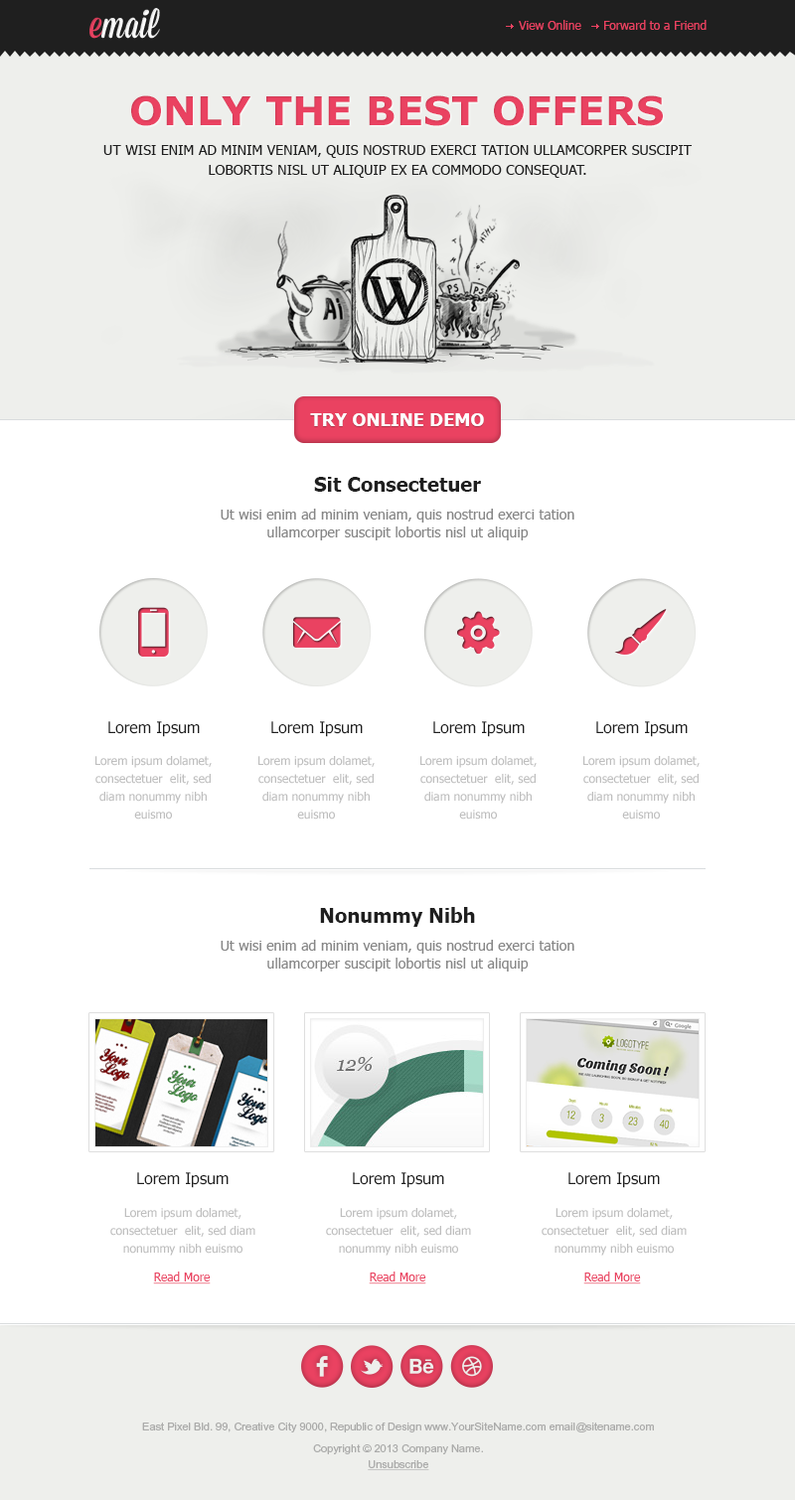
<style>
.page{position:relative;width:795px;height:1500px;background:#ffffff}
.page>*{position:absolute;margin:0}
.t1{font:11.9px "Tahoma";color:#ea4261}
.t2{font:39.7px "Verdana-Bold";color:#ea4261;text-transform:uppercase}
.t3{font:13.9px/19.9px "Tahoma";letter-spacing:0.007em;color:#1f1f1f;text-transform:uppercase}
.t4{font:17.9px "Tahoma-Bold";letter-spacing:0.007em;color:#ffffff}
.t5{font:19.9px "Tahoma-Bold";letter-spacing:0.007em;color:#1f1f1f}
.t6{font:13.9px/17.9px "Tahoma";letter-spacing:0.007em;color:#868686}
.t7{font:15.9px "Tahoma";color:#1f1f1f}
.t8{font:11.9px/17.9px "Tahoma";color:#bebebe}
.t9{font:11.9px "Tahoma";color:#ea4261;text-decoration:underline}
.t10{font:10.9px "ArialMT";color:#969696}
.t11{font:10.9px/15.9px "ArialMT";color:#969696}
.t12{font:10.9px/15.9px "ArialMT";color:#969696;text-decoration:underline}
</style>
<div class="page">
<p class="t1" style="left:519px;top:20px;width:62px;height:10px">View Online</p>
<p class="t1" style="left:604px;top:20px;width:102px;height:10px">Forward to a Friend</p>
<p class="t2" style="left:131px;top:95px;width:532px;height:31px">Only the best Offers</p>
<p class="t3" style="left:103px;top:145px;width:589px;height:33px;text-align:center">Ut wisi enim ad minim veniam, quis nostrud exerci tation ullamcorper suscipit lobortis nisl ut aliquip ex ea commodo consequat.</p>
<p class="t4" style="left:310px;top:413px;width:174px;height:13px">TRY ONLINE DEMO</p>
<p class="t5" style="left:314px;top:477px;width:167px;height:15px">Sit Consectetuer</p>
<p class="t6" style="left:221px;top:509px;width:353px;height:31px;text-align:center">Ut wisi enim ad minim veniam, quis nostrud exerci tation ullamcorper suscipit lobortis nisl ut aliquip</p>
<p class="t7" style="left:108px;top:721px;width:92px;height:16px">Lorem Ipsum</p>
<p class="t7" style="left:271px;top:721px;width:92px;height:16px">Lorem Ipsum</p>
<p class="t7" style="left:433px;top:721px;width:92px;height:16px">Lorem Ipsum</p>
<p class="t7" style="left:596px;top:721px;width:92px;height:16px">Lorem Ipsum</p>
<p class="t8" style="left:95px;top:756px;width:117px;height:64px;text-align:center">Lorem ipsum dolamet, consectetuer  elit, sed diam nonummy nibh euismo</p>
<p class="t8" style="left:258px;top:756px;width:117px;height:64px;text-align:center">Lorem ipsum dolamet, consectetuer  elit, sed diam nonummy nibh euismo</p>
<p class="t8" style="left:420px;top:756px;width:117px;height:64px;text-align:center">Lorem ipsum dolamet, consectetuer  elit, sed diam nonummy nibh euismo</p>
<p class="t8" style="left:583px;top:756px;width:116px;height:64px;text-align:center">Lorem ipsum dolamet, consectetuer  elit, sed diam nonummy nibh euismo</p>
<p class="t5" style="left:320px;top:907px;width:155px;height:20px">Nonummy Nibh</p>
<p class="t6" style="left:221px;top:940px;width:353px;height:32px;text-align:center">Ut wisi enim ad minim veniam, quis nostrud exerci tation ullamcorper suscipit lobortis nisl ut aliquip</p>
<p class="t7" style="left:137px;top:1172px;width:92px;height:16px">Lorem Ipsum</p>
<p class="t7" style="left:353px;top:1172px;width:91px;height:16px">Lorem Ipsum</p>
<p class="t7" style="left:568px;top:1172px;width:92px;height:16px">Lorem Ipsum</p>
<p class="t8" style="left:110px;top:1208px;width:145px;height:48px;text-align:center">Lorem ipsum dolamet, consectetuer  elit, sed diam nonummy nibh euismo</p>
<p class="t8" style="left:326px;top:1208px;width:145px;height:48px;text-align:center">Lorem ipsum dolamet, consectetuer  elit, sed diam nonummy nibh euismo</p>
<p class="t8" style="left:541px;top:1208px;width:146px;height:48px;text-align:center">Lorem ipsum dolamet, consectetuer  elit, sed diam nonummy nibh euismo</p>
<p class="t9" style="left:153px;top:1272px;width:58px;height:13px">Read More</p>
<p class="t9" style="left:369px;top:1272px;width:57px;height:13px">Read More</p>
<p class="t9" style="left:583px;top:1272px;width:58px;height:13px">Read More</p>
<p class="t10" style="left:142px;top:1423px;width:512px;height:10px;opacity:0.78">East Pixel Bld. 99, Creative City 9000, Republic of Design www.YourSiteName.com email@sitename.com</p>
<p class="t11" style="left:313px;top:1445px;width:170px;height:25px;text-align:center;opacity:0.78">Copyright © 2013 Company Name.<br><span class="t12">Unsubscribe</span></p>
</div>
